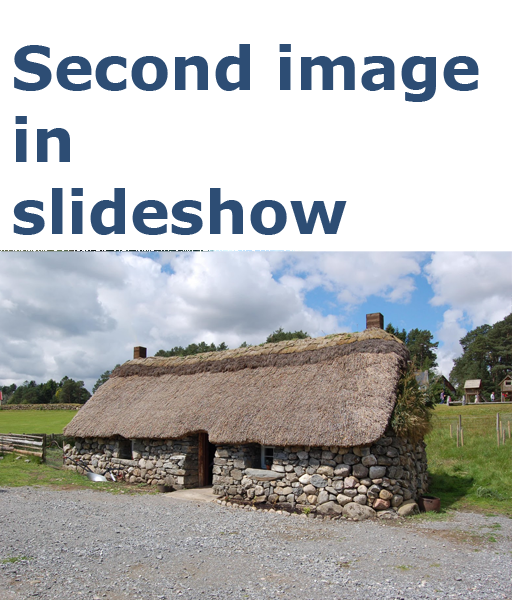
<style>
.page{position:relative;width:512px;height:600px;background:#ffffff}
.page>*{position:absolute;margin:0}
.t1{font:60px "Verdana-Bold";color:#2d4d74}
</style>
<div class="page">
<p class="t1" style="left:13px;top:44px;width:466px;height:191px">Second image in<br>slideshow</p>
</div>
